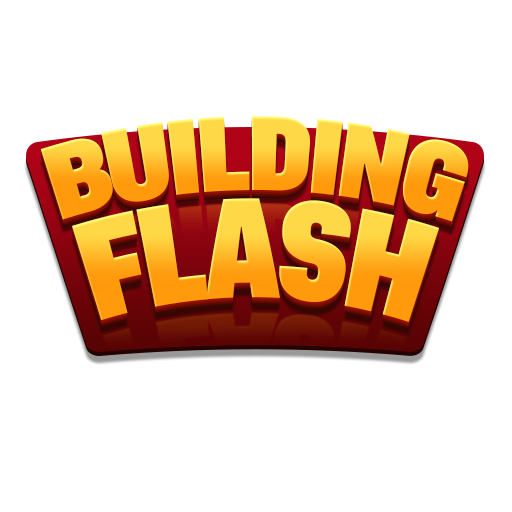
<style>
.page{position:relative;width:512px;height:512px;background:#ffffff}
.page>*{position:absolute;margin:0}
.t1{font:98.8px "AsketCondensed-ExtraBold";letter-spacing:-0.05em;text-transform:uppercase}
.t2{font:131.7px "AsketCondensed-ExtraBold";letter-spacing:-0.05em;text-transform:uppercase;scale:0.83 1}
</style>
<div class="page">
<p class="t1" style="left:40px;top:116px;width:429px;height:106px">building</p>
<p class="t2" style="left:72px;top:198px;width:368px;height:124px">flash</p>
</div>
